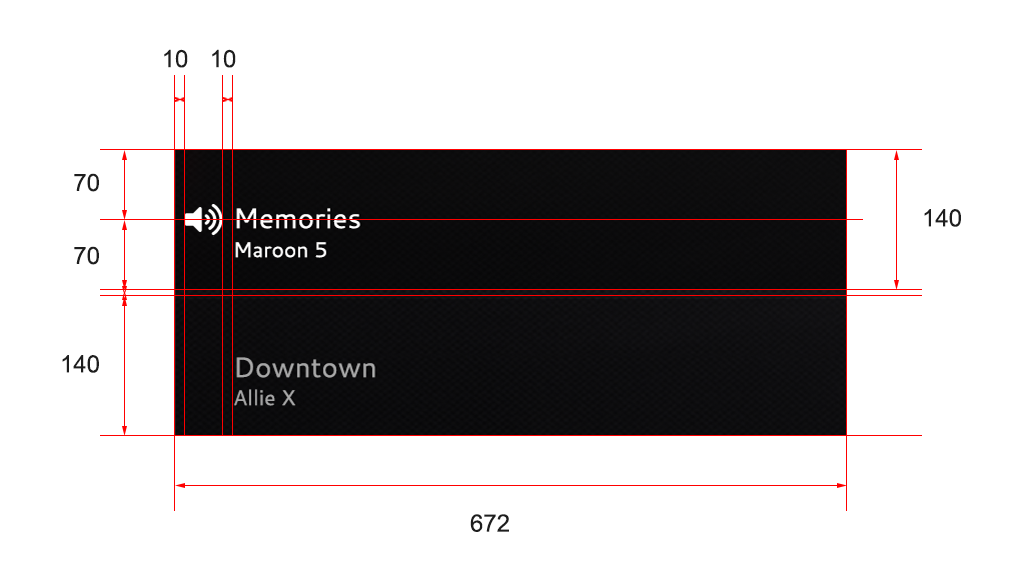
<style>
.page{position:relative;width:1022px;height:586px;background:#ffffff}
.page>*{position:absolute;margin:0}
.t1{font:24px "ArialMT";color:#1e1e1e}
</style>
<div class="page">
<p class="t1" style="left:164px;top:49px;width:24px;height:19px">10</p>
<p class="t1" style="left:212px;top:49px;width:24px;height:19px">10</p>
<p class="t1" style="left:74px;top:173px;width:25px;height:19px">70</p>
<p class="t1" style="left:924px;top:209px;width:37px;height:18px">140</p>
<p class="t1" style="left:74px;top:246px;width:25px;height:19px">70</p>
<p class="t1" style="left:62px;top:355px;width:37px;height:18px">140</p>
<p class="t1" style="left:470px;top:514px;width:39px;height:18px">672</p>
</div>
